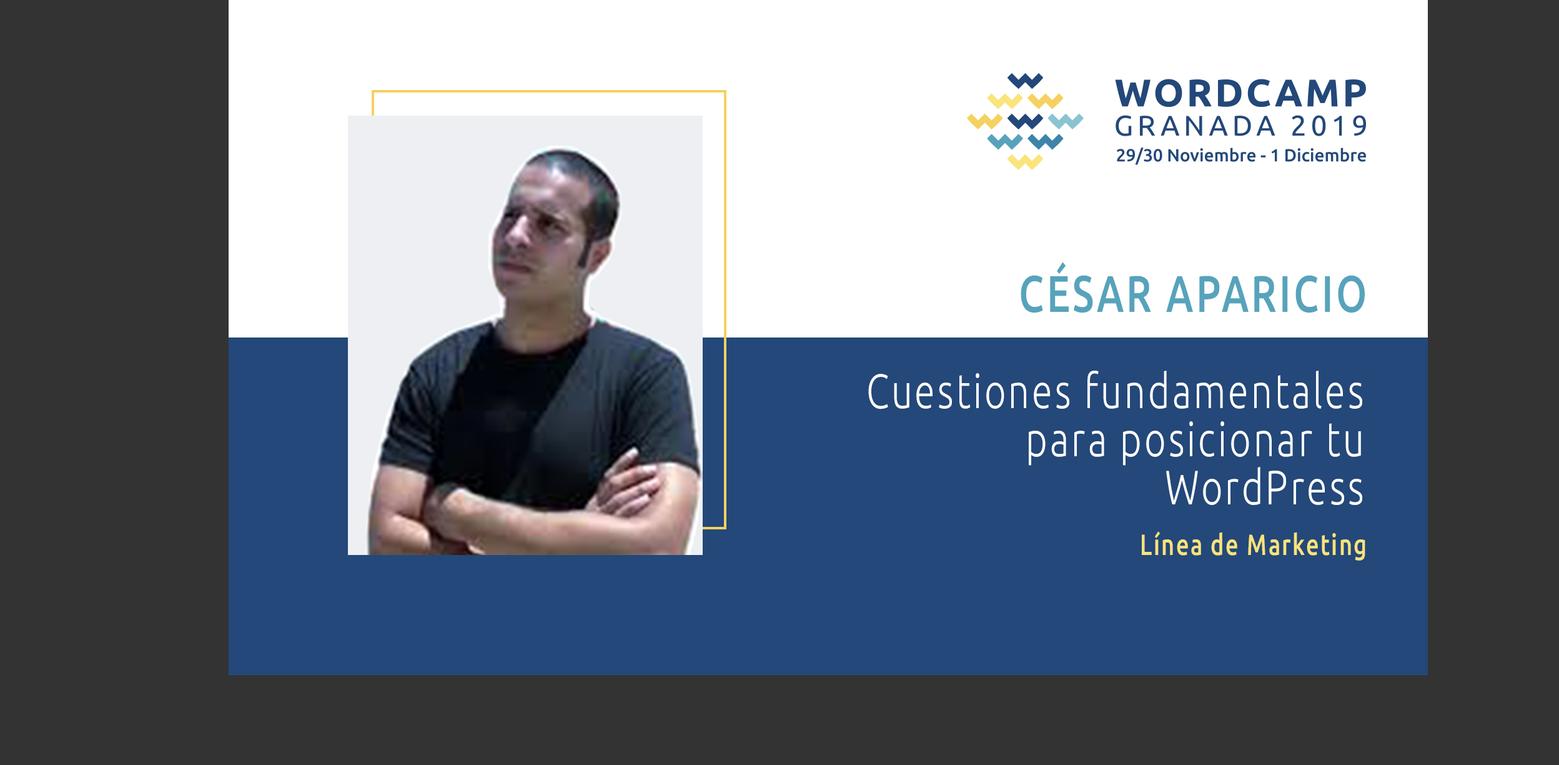
<style>
.page{position:relative;width:1559px;height:765px;background:#333333}
.page>*{position:absolute;margin:0}
.t1{font:51.4px "Ubuntu-Medium";letter-spacing:0.068em;color:#57a3bb;scale:0.77 1}
.t2{font:48.2px/48.2px "Ubuntu-Light";letter-spacing:0.068em;color:#ffffff;scale:0.77 1}
.t3{font:29.2px "Ubuntu-Medium";letter-spacing:0.068em;color:#f9e37b;scale:0.77 1}
</style>
<div class="page">
<p class="t1" style="left:1021px;top:262px;width:344px;height:51px">CÉSAR APARICIO</p>
<p class="t2" style="left:868px;top:370px;width:495px;height:135px;text-align:right">Cuestiones fundamentales para posicionar tu WordPress</p>
<p class="t3" style="left:1142px;top:531px;width:224px;height:29px">Línea de Marketing</p>
</div>
